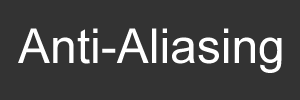
<style>
.page{position:relative;width:300px;height:100px;background:#333333}
.page>*{position:absolute;margin:0}
.t1{font:48px "ArialMT";color:#ffffff}
</style>
<div class="page">
<p class="t1" style="left:18px;top:28px;width:264px;height:45px">Anti-Aliasing</p>
</div>
